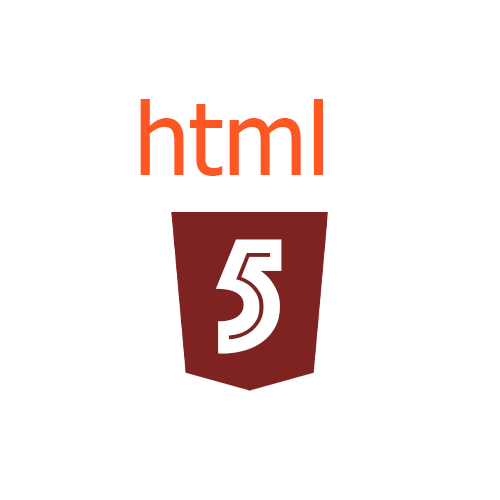
<style>
.page{position:relative;width:500px;height:500px;background:#ffffff}
.page>*{position:absolute;margin:0}
.t1{font:100px "Zawgyi-One";color:#ff5722}
.t2{font:166.7px "Phosphate-Inline";color:#ffffff}
</style>
<div class="page">
<p class="t1" style="left:140px;top:99px;width:183px;height:77px">html</p>
<p class="t2" style="left:216px;top:239px;width:66px;height:115px">5</p>
</div>
